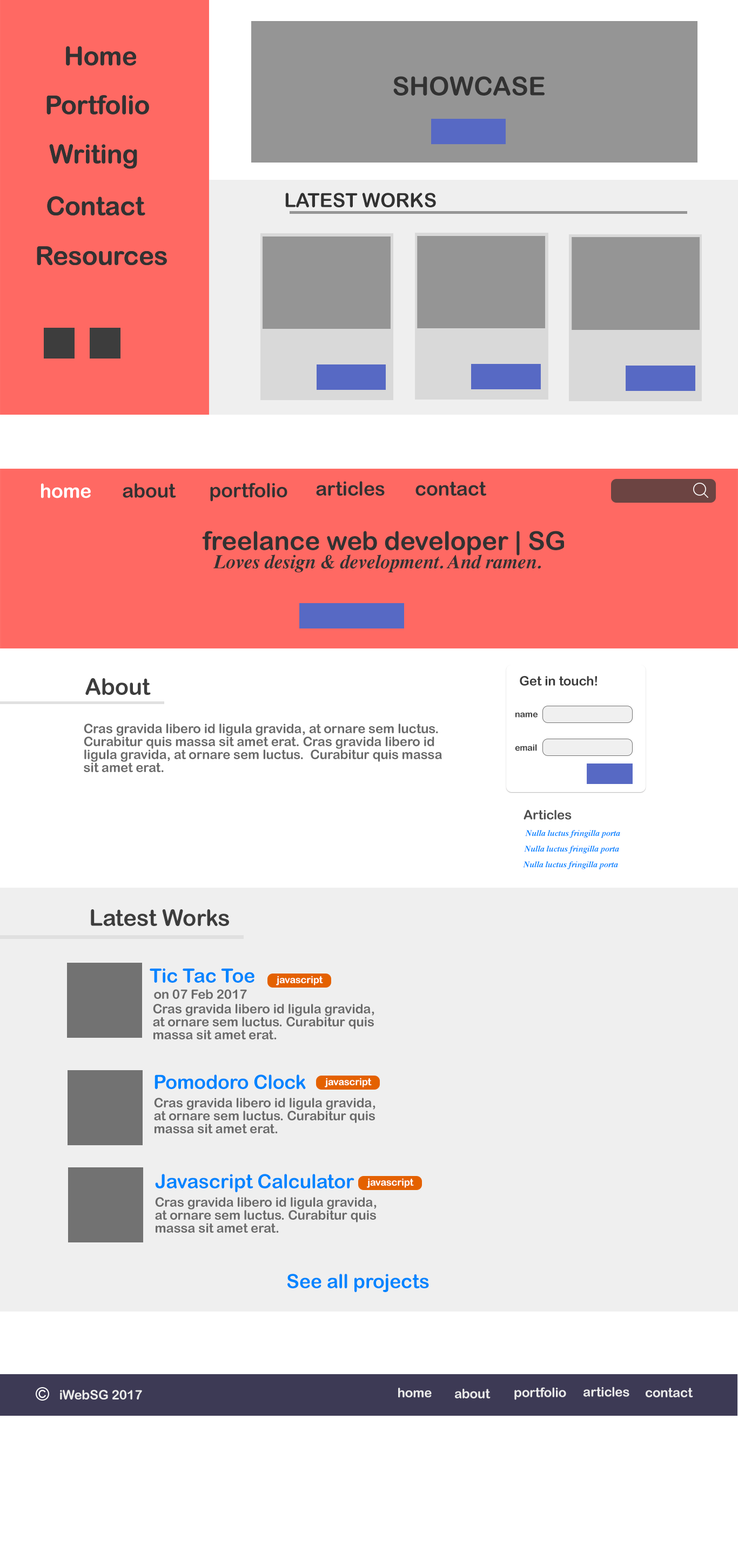
<style>
.page{position:relative;width:738px;height:1568px;background:#ffffff}
.page>*{position:absolute;margin:0}
.t1{font:25.9px "ArialRoundedMTBold";letter-spacing:-0.007em;color:#323232}
.t2{font:19.4px "ArialRoundedMTBold";letter-spacing:-0.007em;color:#323232}
.t3{font:19.4px "ArialRoundedMTBold";letter-spacing:-0.007em;color:#ffffff}
.t4{font:19.4px "Times-BoldItalic";letter-spacing:-0.007em;color:#323232}
.t5{font:13px "ArialRoundedMTBold";letter-spacing:-0.007em;color:#3d3d3d}
.t6{font:22.7px "ArialRoundedMTBold";letter-spacing:-0.007em;color:#3d3d3d}
.t7{font:8.6px "ArialRoundedMTBold";letter-spacing:-0.007em;color:#3d3d3d}
.t8{font:13px/13px "ArialRoundedMTBold";letter-spacing:-0.007em;color:#6a6a6a}
.t9{font:13px "ArialRoundedMTBold";letter-spacing:-0.007em;color:#4f4f4f}
.t10{font:8.6px "Times-BoldItalic";letter-spacing:-0.007em;color:#0084ff}
.t11{font:19.4px "ArialRoundedMTBold";letter-spacing:-0.007em;color:#0084ff}
.t12{font:9.7px "ArialRoundedMTBold";letter-spacing:-0.007em;color:#ffffff}
.t13{font:13px "ArialRoundedMTBold";letter-spacing:-0.007em;color:#6a6a6a}
.t14{font:13px "ArialRoundedMTBold";letter-spacing:-0.007em;color:#eaeaea}
</style>
<div class="page">
<p class="t1" style="left:66px;top:46px;width:70px;height:20px">Home</p>
<p class="t1" style="left:66px;top:46px;width:70px;height:20px">Home</p>
<p class="t1" style="left:393px;top:76px;width:151px;height:20px">SHOWCASE</p>
<p class="t1" style="left:46px;top:95px;width:103px;height:19px">Portfolio</p>
<p class="t1" style="left:46px;top:95px;width:103px;height:19px">Portfolio</p>
<p class="t1" style="left:49px;top:144px;width:88px;height:25px">Writing</p>
<p class="t1" style="left:49px;top:144px;width:88px;height:25px">Writing</p>
<p class="t1" style="left:47px;top:196px;width:98px;height:19px">Contact</p>
<p class="t1" style="left:47px;top:196px;width:98px;height:19px">Contact</p>
<p class="t2" style="left:285px;top:193px;width:151px;height:14px">LATEST WORKS</p>
<p class="t1" style="left:37px;top:246px;width:130px;height:19px">Resources</p>
<p class="t1" style="left:37px;top:246px;width:130px;height:19px">Resources</p>
<p class="t3" style="left:41px;top:483px;width:50px;height:15px">home</p>
<p class="t2" style="left:123px;top:483px;width:53px;height:15px">about</p>
<p class="t2" style="left:210px;top:483px;width:77px;height:19px">portfolio</p>
<p class="t2" style="left:316px;top:481px;width:68px;height:15px">articles</p>
<p class="t2" style="left:415px;top:482px;width:71px;height:14px">contact</p>
<p class="t1" style="left:202px;top:531px;width:362px;height:25px">freelance web developer | SG</p>
<p class="t4" style="left:213px;top:555px;width:327px;height:17px">Loves design &amp; development. And ramen.</p>
<p class="t5" style="left:519px;top:676px;width:78px;height:10px">Get in touch!</p>
<p class="t6" style="left:85px;top:678px;width:66px;height:17px">About</p>
<p class="t7" style="left:515px;top:712px;width:22px;height:6px">name</p>
<p class="t8" style="left:84px;top:724px;width:358px;height:48px;text-align:justify">Cras gravida libero id ligula gravida, at ornare sem luctus. <br>Curabitur quis massa sit amet erat. Cras gravida libero id <br>ligula gravida, at ornare sem luctus.  Curabitur quis massa<br>sit amet erat.</p>
<p class="t7" style="left:515px;top:744px;width:22px;height:7px">email</p>
<p class="t9" style="left:523px;top:810px;width:48px;height:10px">Articles</p>
<p class="t10" style="left:525px;top:830px;width:95px;height:8px">Nulla luctus fringilla porta</p>
<p class="t10" style="left:524px;top:846px;width:95px;height:8px">Nulla luctus fringilla porta</p>
<p class="t10" style="left:523px;top:861px;width:95px;height:8px">Nulla luctus fringilla porta</p>
<p class="t6" style="left:91px;top:909px;width:138px;height:17px">Latest Works</p>
<p class="t11" style="left:150px;top:968px;width:104px;height:15px">Tic Tac Toe</p>
<p class="t12" style="left:276px;top:976px;width:47px;height:9px">javascript</p>
<p class="t13" style="left:154px;top:989px;width:93px;height:10px">on 07 Feb 2017</p>
<p class="t8" style="left:153px;top:1004px;width:221px;height:35px;text-align:justify">Cras gravida libero id ligula gravida,<br>at ornare sem luctus. Curabitur quis<br>massa sit amet erat.</p>
<p class="t11" style="left:154px;top:1074px;width:152px;height:15px">Pomodoro Clock</p>
<p class="t12" style="left:325px;top:1078px;width:46px;height:9px">javascript</p>
<p class="t8" style="left:154px;top:1098px;width:221px;height:35px;text-align:justify">Cras gravida libero id ligula gravida,<br>at ornare sem luctus. Curabitur quis<br>massa sit amet erat.</p>
<p class="t11" style="left:155px;top:1174px;width:199px;height:18px">Javascript Calculator</p>
<p class="t12" style="left:367px;top:1178px;width:47px;height:10px">javascript</p>
<p class="t8" style="left:155px;top:1197px;width:221px;height:36px;text-align:justify">Cras gravida libero id ligula gravida,<br>at ornare sem luctus. Curabitur quis<br>massa sit amet erat.</p>
<p class="t11" style="left:287px;top:1274px;width:142px;height:18px">See all projects</p>
<p class="t14" style="left:60px;top:1390px;width:82px;height:10px">iWebSG 2017</p>
<p class="t14" style="left:398px;top:1388px;width:33px;height:9px">home</p>
<p class="t14" style="left:455px;top:1389px;width:35px;height:9px">about</p>
<p class="t14" style="left:514px;top:1387px;width:52px;height:13px">portfolio</p>
<p class="t14" style="left:583px;top:1387px;width:46px;height:10px">articles</p>
<p class="t14" style="left:645px;top:1388px;width:48px;height:9px">contact</p>
</div>
